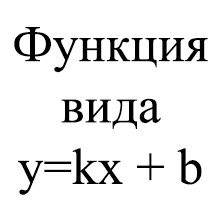
<style>
.page{position:relative;width:221px;height:221px;background:#ffffff}
.page>*{position:absolute;margin:0}
.t1{font:51.1px "TimesNewRomanPSMT";color:#000000}
</style>
<div class="page">
<p class="t1" style="left:14px;top:27px;width:194px;height:168px;text-align:center">Функция<br>вида<br>y=kx + b</p>
</div>
